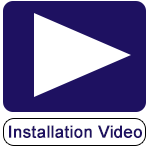
<style>
.page{position:relative;width:150px;height:150px;background:#1e1161}
.page>*{position:absolute;margin:0}
.t1{font:16.7px "ArialMT";color:#1e1161;font-weight:bold}
</style>
<div class="page">
<p class="t1" style="left:9px;top:125px;width:133px;height:13px">Installation Video</p>
</div>
